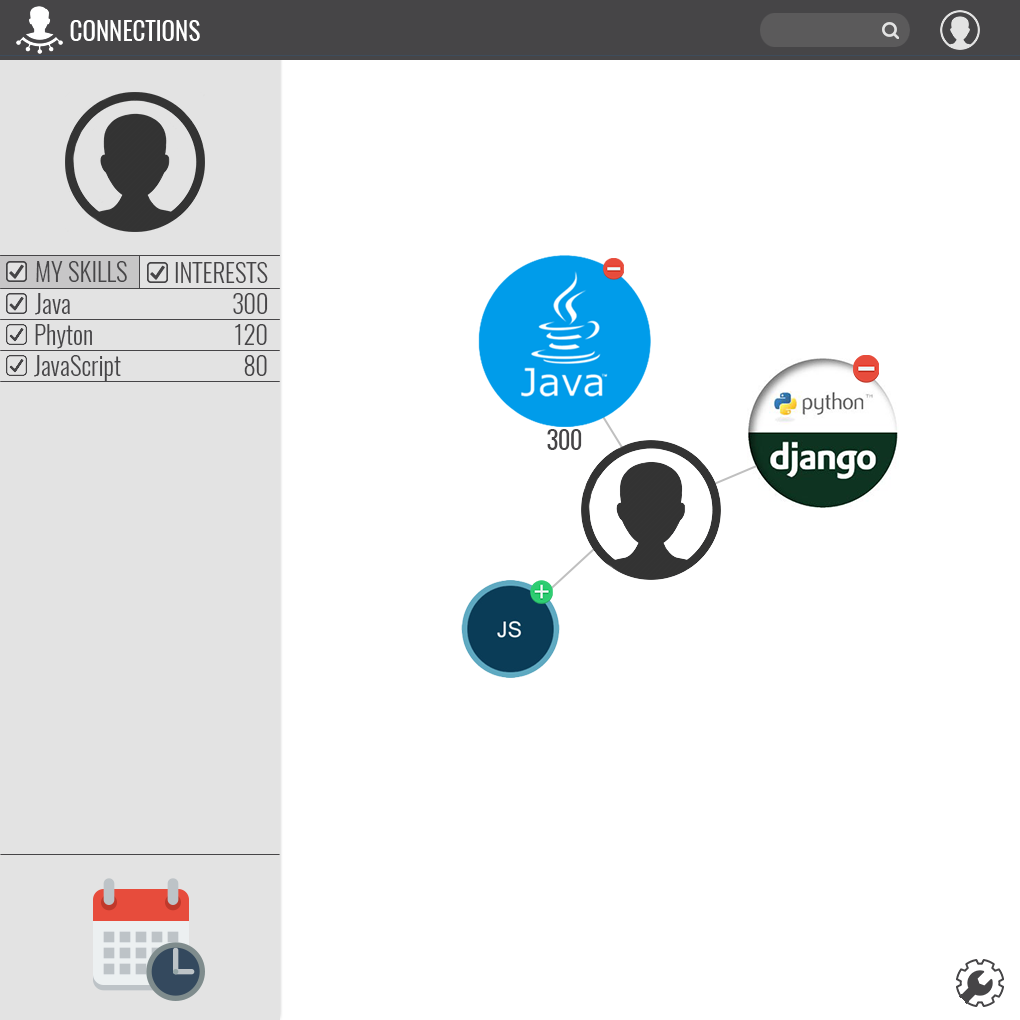
<style>
.page{position:relative;width:1020px;height:1020px;background:#ffffff}
.page>*{position:absolute;margin:0}
.t1{font:25px "Oswald-Regular";color:#ffffff}
.t2{font:25px "Oswald-Light";color:#464547}
.t3{font:25px "Oswald-Regular";color:#464547}
</style>
<div class="page">
<p class="t1" style="left:70px;top:20px;width:130px;height:21px">CONNECTIONS</p>
<p class="t2" style="left:36px;top:261px;width:91px;height:21px">MY SKILLS</p>
<p class="t2" style="left:175px;top:262px;width:93px;height:21px">INTERESTS</p>
<p class="t2" style="left:35px;top:293px;width:35px;height:22px">Java</p>
<p class="t2" style="left:233px;top:293px;width:35px;height:21px">300</p>
<p class="t2" style="left:35px;top:324px;width:57px;height:25px">Phyton</p>
<p class="t2" style="left:235px;top:324px;width:32px;height:21px">120</p>
<p class="t2" style="left:34px;top:355px;width:87px;height:26px">JavaScript</p>
<p class="t2" style="left:244px;top:355px;width:23px;height:21px">80</p>
<p class="t3" style="left:547px;top:429px;width:35px;height:21px">300</p>
</div>
